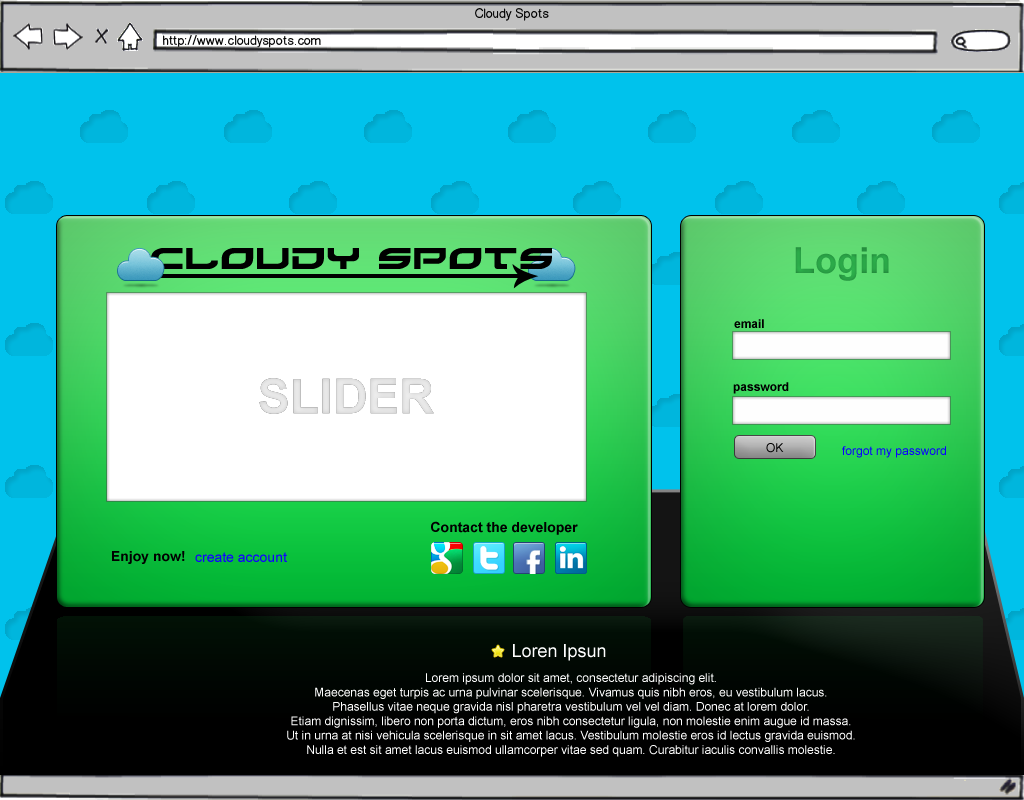
<style>
.page{position:relative;width:1024px;height:800px}
.page>*{position:absolute;margin:0}
.t1{font:36px "Arial-BoldMT";color:#29a346}
.t2{font:12px "Arial-BoldMT";color:#000000}
.t3{font:48px "Arial-BoldMT";color:#e5e5e5}
.t4{font:12px "ArialMT";color:#000000}
.t5{font:12px "ArialMT";color:#0c00ff}
.t6{font:14px "Arial-BoldMT";color:#000000}
.t7{font:14px "ArialMT";color:#1200ff}
.t8{font:18px "ArialMT";color:#ffffff}
.t9{font:12px "ArialMT";color:#ffffff}
</style>
<div class="page">
<p class="t1" style="left:795px;top:247px;width:94px;height:34px">Login</p>
<p class="t2" style="left:734px;top:319px;width:30px;height:9px">email</p>
<p class="t3" style="left:259px;top:378px;width:175px;height:36px">SLIDER</p>
<p class="t2" style="left:733px;top:382px;width:56px;height:12px">password</p>
<p class="t4" style="left:766px;top:443px;width:18px;height:10px">OK</p>
<p class="t5" style="left:842px;top:446px;width:104px;height:12px">forgot my password</p>
<p class="t6" style="left:431px;top:521px;width:147px;height:14px">Contact the developer</p>
<p class="t6" style="left:112px;top:551px;width:73px;height:13px">Enjoy now!</p>
<p class="t7" style="left:195px;top:552px;width:92px;height:10px">create account</p>
<p class="t8" style="left:513px;top:644px;width:93px;height:17px">Loren Ipsun</p>
<p class="t9" style="left:287px;top:673px;width:568px;height:84px;text-align:center">Lorem ipsum dolor sit amet, consectetur adipiscing elit.<br>Maecenas eget turpis ac urna pulvinar scelerisque. Vivamus quis nibh eros, eu vestibulum lacus.<br>Phasellus vitae neque gravida nisl pharetra vestibulum vel vel diam. Donec at lorem dolor.<br>Etiam dignissim, libero non porta dictum, eros nibh consectetur ligula, non molestie enim augue id massa.<br>Ut in urna at nisi vehicula scelerisque in sit amet lacus. Vestibulum molestie eros id lectus gravida euismod.<br>Nulla et est sit amet lacus euismod ullamcorper vitae sed quam. Curabitur iaculis convallis molestie.</p>
</div>
